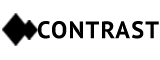
<style>
.page{position:relative;width:160px;height:60px;background:#ffffff}
.page>*{position:absolute;margin:0}
.t1{font:24px "PTSans-Bold";letter-spacing:0.05em;color:#000000;text-transform:uppercase}
</style>
<div class="page">
<p class="t1" style="left:38px;top:21px;width:121px;height:18px">Contrast</p>
</div>
